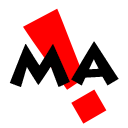
<style>
.page{position:relative;width:128px;height:128px;background:#ffffff}
.page>*{position:absolute;margin:0}
.t1{font:158.8px "LithosPro-Black";color:#ff0000}
.t2{font:56.4px "LithosPro-Black";color:#000000}
</style>
<div class="page">
<p class="t1" style="left:23px;top:8px;width:84px;height:116px;rotate:-30deg">!</p>
<p class="t2" style="left:9px;top:41px;width:110px;height:46px">MA</p>
</div>
